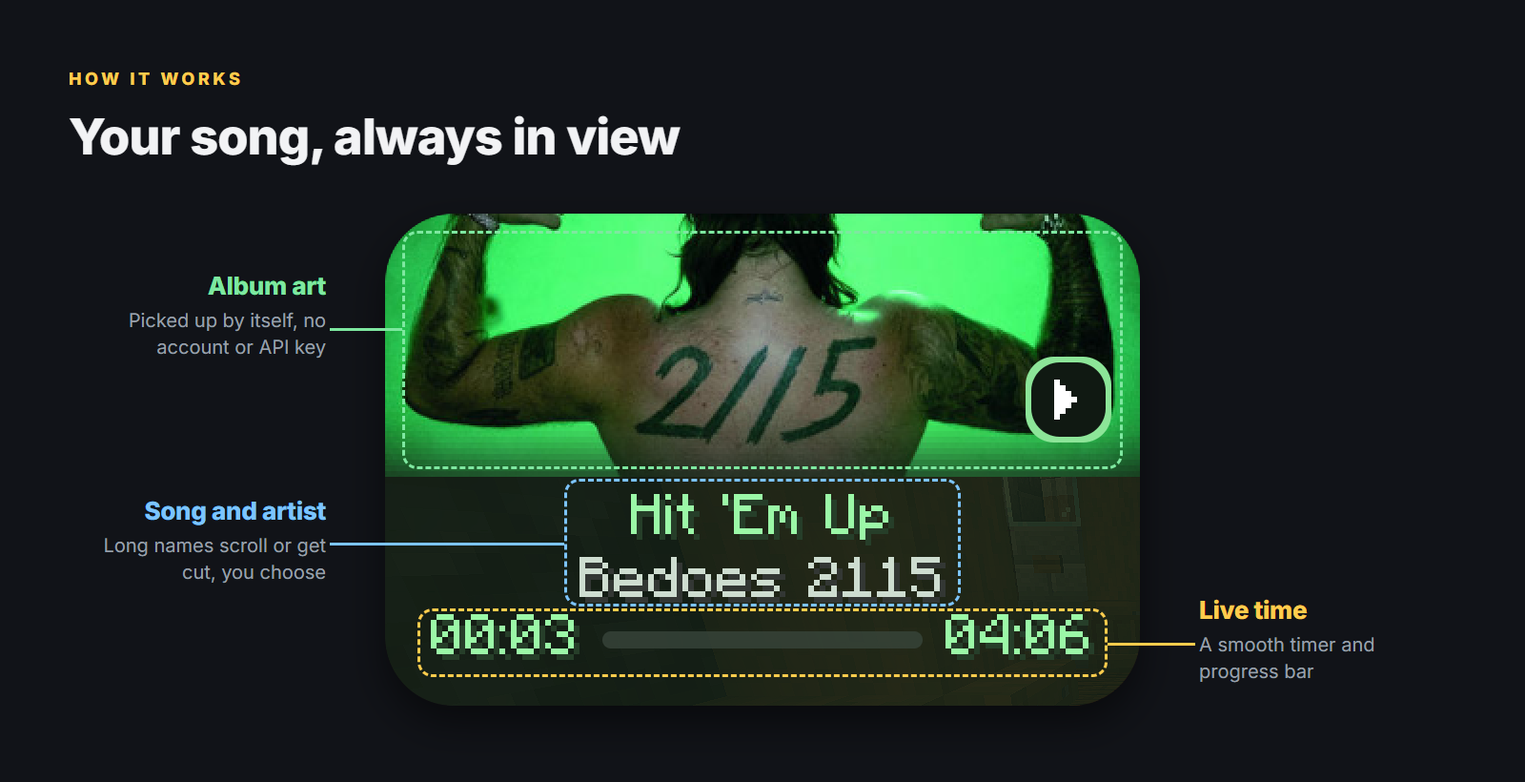
<style>
.page{position:relative;width:1525px;height:782px;background:#111318}
.page>*{position:absolute;margin:0}
.t1{font:17.2px "Inter-ExtraBold";letter-spacing:0.2em;color:#ffcc4d}
.t2{font:49.6px "Inter-ExtraBold";letter-spacing:-0.015em;color:#f2f3f5}
.t3{font:24.8px "Inter-ExtraBold";letter-spacing:-0.012em;color:#7ee8a0}
.t4{font:19.1px/26.7px "Inter-Regular";color:#9aa0ab}
.t5{font:24.8px "Inter-ExtraBold";letter-spacing:-0.012em;color:#7cc4ff}
.t6{font:24.8px "Inter-ExtraBold";letter-spacing:-0.012em;color:#ffcc4d}
</style>
<div class="page">
<p class="t1" style="left:69px;top:72px;width:171px;height:14px">HOW IT WORKS</p>
<p class="t2" style="left:69px;top:115px;width:612px;height:51px">Your song, always in view</p>
<p class="t3" style="left:208px;top:276px;width:119px;height:20px">Album art</p>
<p class="t4" style="left:130px;top:312px;width:196px;height:46px;text-align:right">Picked up by itself, no account or API key</p>
<p class="t5" style="left:145px;top:500px;width:182px;height:25px">Song and artist</p>
<p class="t4" style="left:105px;top:538px;width:221px;height:45px;text-align:right">Long names scroll or get cut, you choose</p>
<p class="t6" style="left:1200px;top:599px;width:108px;height:21px">Live time</p>
<p class="t4" style="left:1199px;top:637px;width:176px;height:46px">A smooth timer and progress bar</p>
</div>
